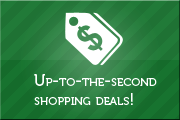
<style>
.page{position:relative;width:180px;height:120px}
.page>*{position:absolute;margin:0}
.t1{font:16px "Museo500-Regular";color:#ffffff;font-variant:small-caps}
</style>
<div class="page">
<p class="t1" style="left:34px;top:74px;width:123px;height:31px">Up-to-the-second<br>shopping deals!</p>
</div>
